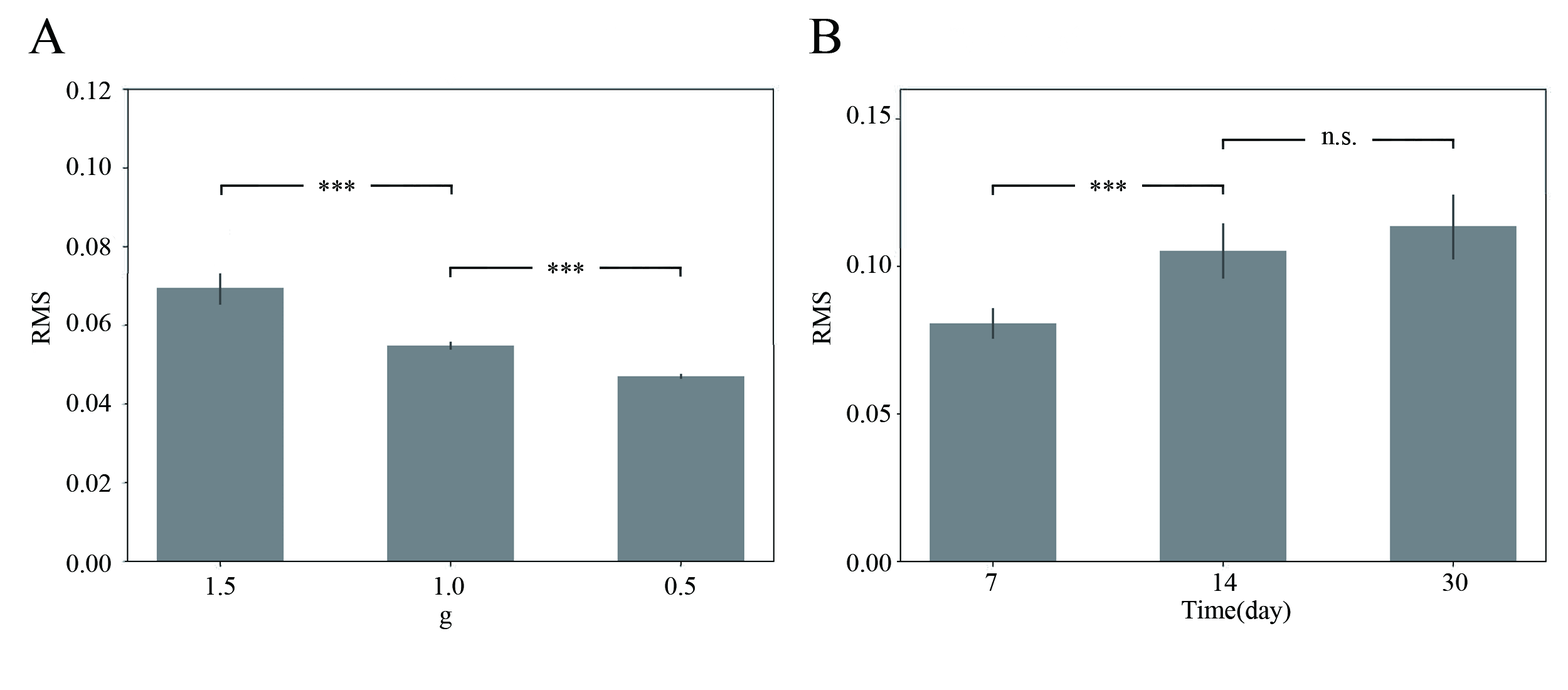
<style>
.page{position:relative;width:1568px;height:690px;background:#ffffff}
.page>*{position:absolute;margin:0}
.t1{font:52.3px "TimesNewRomanPSMT";color:#040606}
.t2{font:26.1px "TimesNewRomanPSMT";color:#040606}
</style>
<div class="page">
<p class="t1" style="left:28px;top:18px;width:37px;height:35px">A</p>
<p class="t1" style="left:809px;top:19px;width:31px;height:34px">B</p>
<p class="t2" style="left:66px;top:82px;width:45px;height:18px">0.12</p>
<p class="t2" style="left:847px;top:106px;width:44px;height:18px">0.15</p>
<p class="t2" style="left:1322px;top:132px;width:34px;height:13px">n.s.</p>
<p class="t2" style="left:66px;top:157px;width:45px;height:19px">0.10</p>
<p class="t2" style="left:66px;top:238px;width:44px;height:18px">0.08</p>
<p class="t2" style="left:847px;top:255px;width:44px;height:18px">0.10</p>
<p class="t2" style="left:31px;top:292px;width:19px;height:53px;rotate:180deg">RMS</p>
<p class="t2" style="left:812px;top:292px;width:19px;height:53px;rotate:180deg">RMS</p>
<p class="t2" style="left:66px;top:314px;width:45px;height:18px">0.06</p>
<p class="t2" style="left:66px;top:394px;width:45px;height:18px">0.04</p>
<p class="t2" style="left:847px;top:405px;width:44px;height:18px">0.05</p>
<p class="t2" style="left:66px;top:474px;width:45px;height:18px">0.02</p>
<p class="t2" style="left:66px;top:554px;width:45px;height:19px">0.00</p>
<p class="t2" style="left:847px;top:554px;width:44px;height:18px">0.00</p>
<p class="t2" style="left:207px;top:577px;width:28px;height:18px">1.5</p>
<p class="t2" style="left:435px;top:577px;width:29px;height:18px">1.0</p>
<p class="t2" style="left:665px;top:577px;width:31px;height:18px">0.5</p>
<p class="t2" style="left:985px;top:573px;width:12px;height:18px">7</p>
<p class="t2" style="left:1214px;top:573px;width:23px;height:18px">14</p>
<p class="t2" style="left:1443px;top:573px;width:25px;height:18px">30</p>
<p class="t2" style="left:1182px;top:600px;width:109px;height:24px">Time(day)</p>
<p class="t2" style="left:440px;top:611px;width:12px;height:18px">g</p>
</div>
